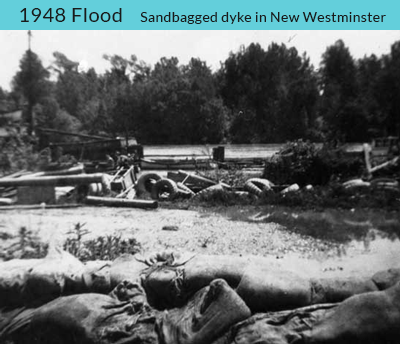
<style>
.page{position:relative;width:400px;height:344px}
.page>*{position:absolute;margin:0}
.t1{font:20px "Lato-Regular";letter-spacing:0.025em;color:#1a1a1a}
.t2{font:14px "Lato-Regular";letter-spacing:0.025em;color:#1a1a1a}
</style>
<div class="page">
<p class="t1" style="left:20px;top:8px;width:102px;height:14px">1948 Flood</p>
<p class="t2" style="left:140px;top:12px;width:246px;height:12px">Sandbagged dyke in New Westminster</p>
</div>
